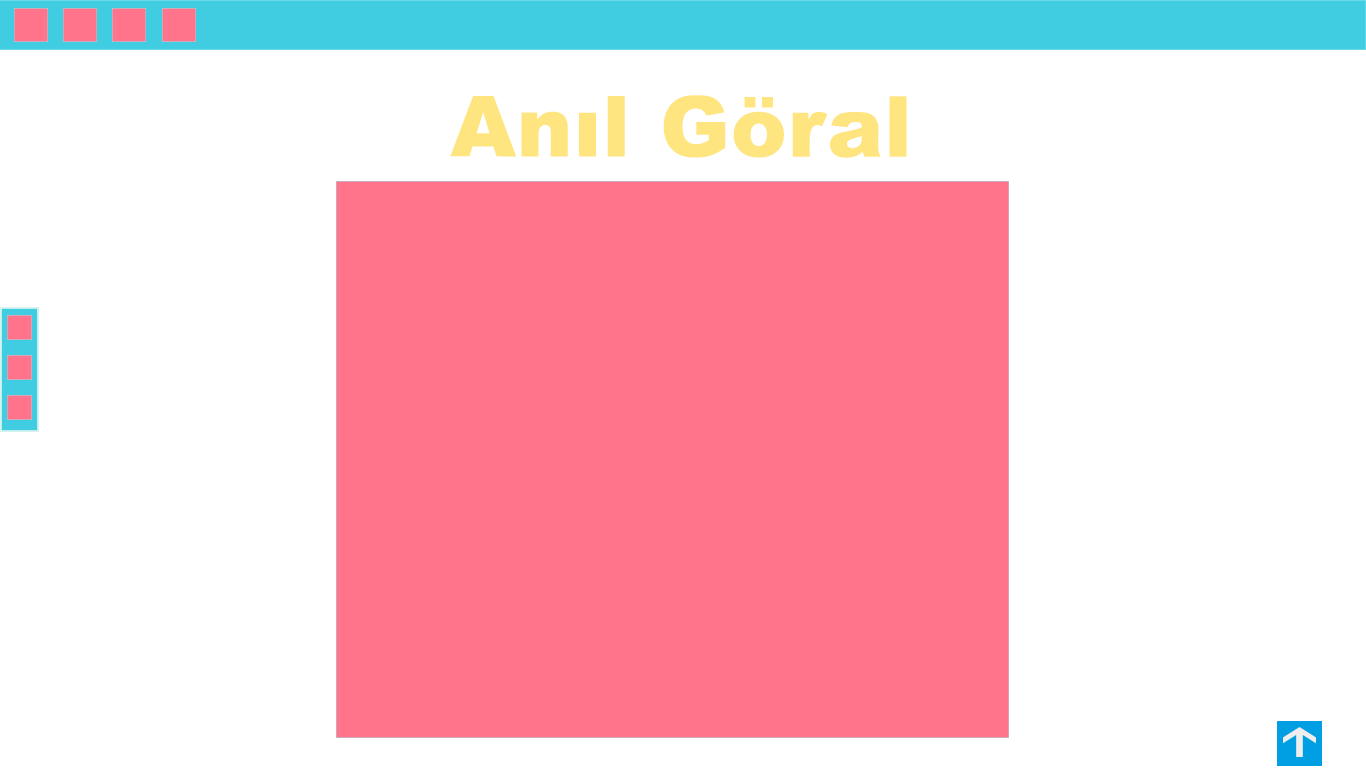
<style>
.page{position:relative;width:1366px;height:768px;background:#ffffff}
.page>*{position:absolute;margin:0}
.t1{font:84px "Arial-Black";letter-spacing:0.01em;color:#ffe580}
</style>
<div class="page">
<p class="t1" style="left:450px;top:95px;width:457px;height:63px">Anıl Göral</p>
</div>
